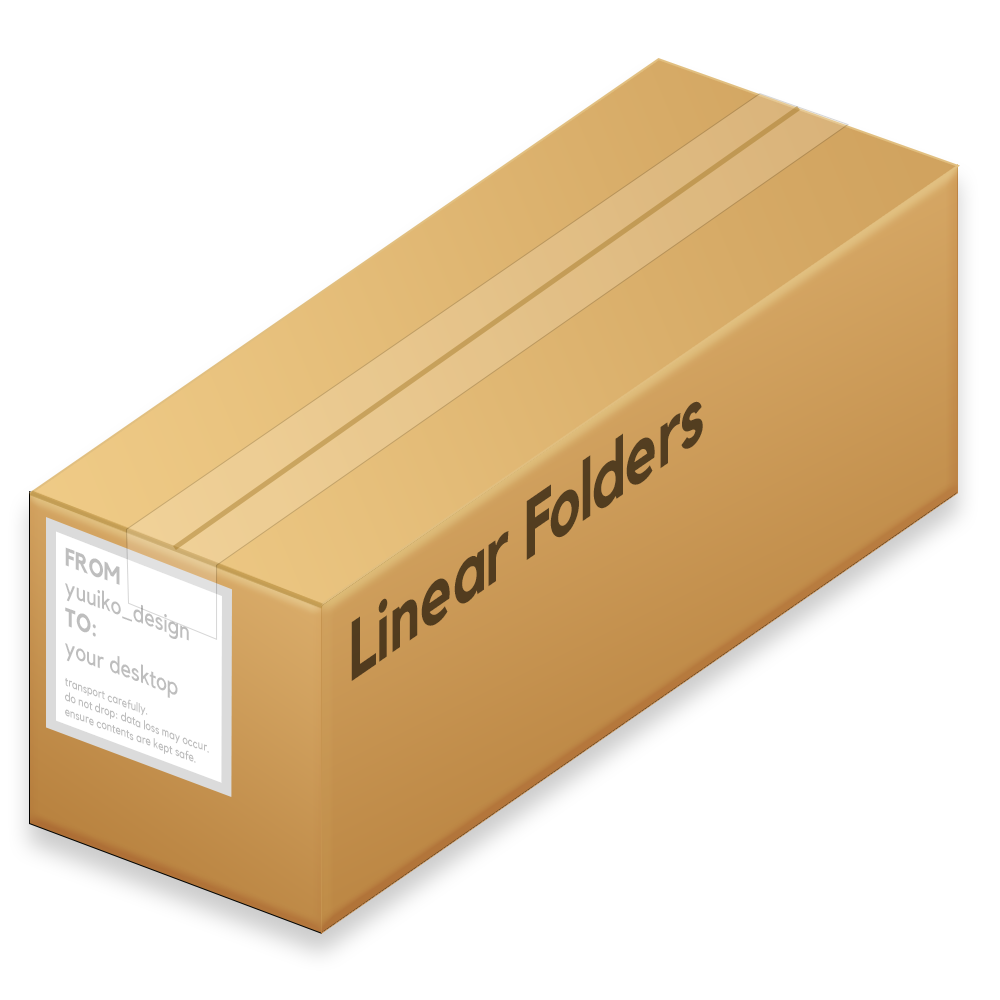
<style>
.page{position:relative;width:1000px;height:1000px;background:#ffffff}
.page>*{position:absolute;margin:0}
.t1{font:83.3px "Kollektif-Bold";color:#533d1f;scale:0.8 1}
.t2{font:12.5px "Kollektif";color:#bebebe;scale:0.84 1}
.t3{font:25px "Kollektif-Bold";color:#bebebe;scale:0.84 1}
.t4{font:25px "Kollektif";color:#bebebe;scale:0.84 1}
</style>
<div class="page">
<p class="t1" style="left:351px;top:401px;width:352px;height:280px;rotate:-35deg">Linear Folders</p>
<p class="t2" style="left:65px;top:547px;width:144px;height:216px;rotate:20deg"><span class="t3">FROM<br></span><span class="t4">yuuiko_design</span><span class="t3"><br>TO:<br></span><span class="t4">your desktop<br></span><br>transport carefully.<br>do not drop: data loss may occur.<br>ensure contents are kept safe.</p>
</div>
